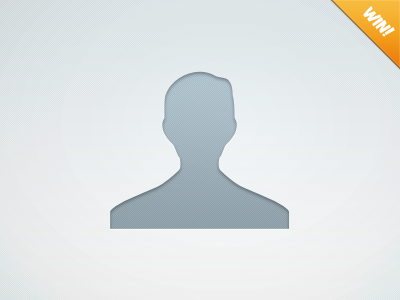
<style>
.page{position:relative;width:400px;height:300px}
.page>*{position:absolute;margin:0}
.t1{font:14px "KomikaAxis";color:#ffffff}
</style>
<div class="page">
<p class="t1" style="left:363px;top:6px;width:32px;height:31px;rotate:45deg">win!</p>
</div>
